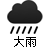
<style>
.page{position:relative;width:50px;height:48px;background:#ffffff}
.page>*{position:absolute;margin:0}
.t1{font:12px "OPPOSans-R";color:#000000}
</style>
<div class="page">
<p class="t1" style="left:14px;top:36px;width:22px;height:11px">大雨</p>
</div>
